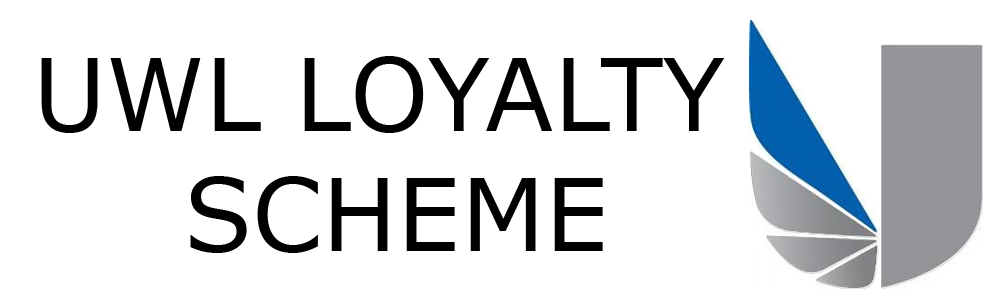
<style>
.page{position:relative;width:1000px;height:300px;background:#ffffff}
.page>*{position:absolute;margin:0}
.t1{font:100px "MSReferenceSansSerif";color:#000000}
</style>
<div class="page">
<p class="t1" style="left:41px;top:56px;width:684px;height:197px;text-align:center">UWL LOYALTY <br>SCHEME</p>
</div>
